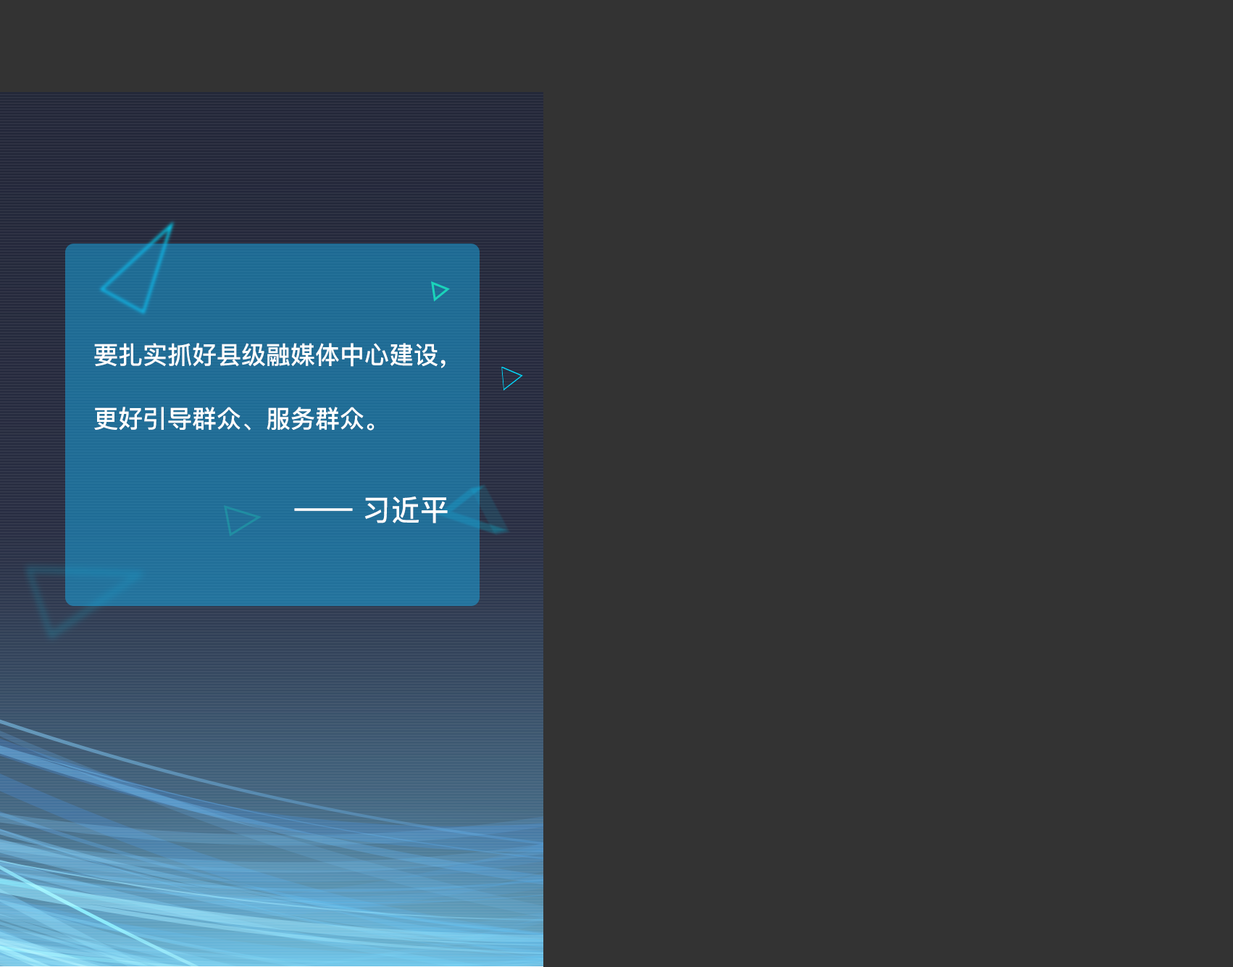
<style>
.page{position:relative;width:1233px;height:967px;background:#333333}
.page>*{position:absolute;margin:0}
.t1{font:24.6px/63.8px "PingFangSC-Medium";color:#ffffff}
.t2{font:29px "PingFangSC-Medium";color:#ffffff}
</style>
<div class="page">
<p class="t1" style="left:94px;top:343px;width:352px;height:87px">要扎实抓好县级融媒体中心建设，<br>更好引导群众、服务群众。</p>
<p class="t2" style="left:294px;top:496px;width:154px;height:27px">—— 习近平</p>
</div>
